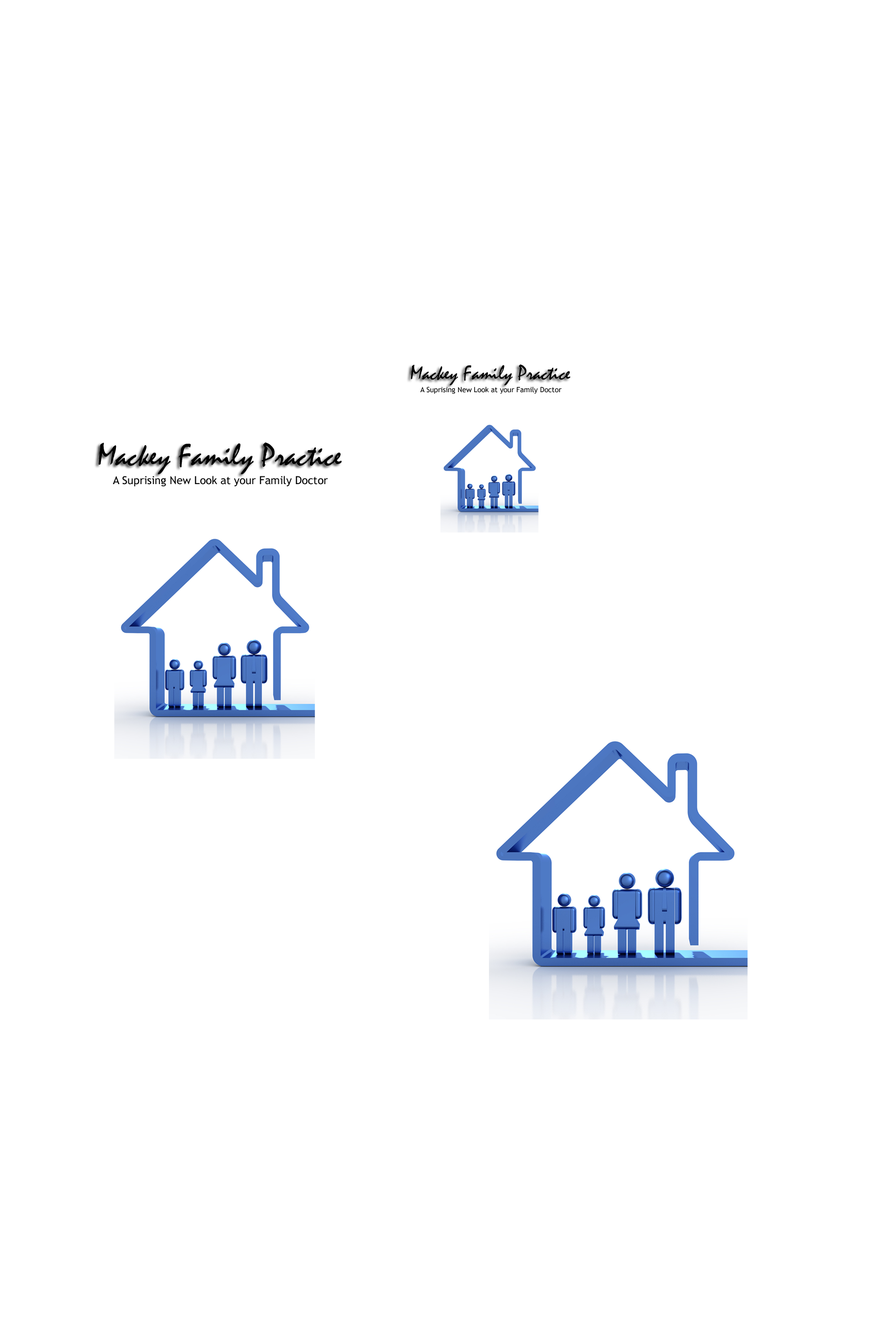
<style>
.page{position:relative;width:892px;height:1337px;background:#ffffff}
.page>*{position:absolute;margin:0}
.t1{font:20.6px "Mistral";color:#000000}
.t2{font:7.2px "TrebuchetMS";color:#000000}
.t3{font:31.4px "Mistral";color:#000000}
.t4{font:11px "TrebuchetMS";color:#000000}
</style>
<div class="page">
<p class="t1" style="left:411px;top:364px;width:159px;height:22px">Mackey Family Practice</p>
<p class="t2" style="left:420px;top:387px;width:142px;height:7px"><span class="t1"><br></span>A Suprising New Look at your Family Doctor</p>
<p class="t3" style="left:98px;top:442px;width:244px;height:33px">Mackey Family Practice</p>
<p class="t4" style="left:113px;top:476px;width:215px;height:10px"><span class="t3"><br></span>A Suprising New Look at your Family Doctor</p>
</div>
